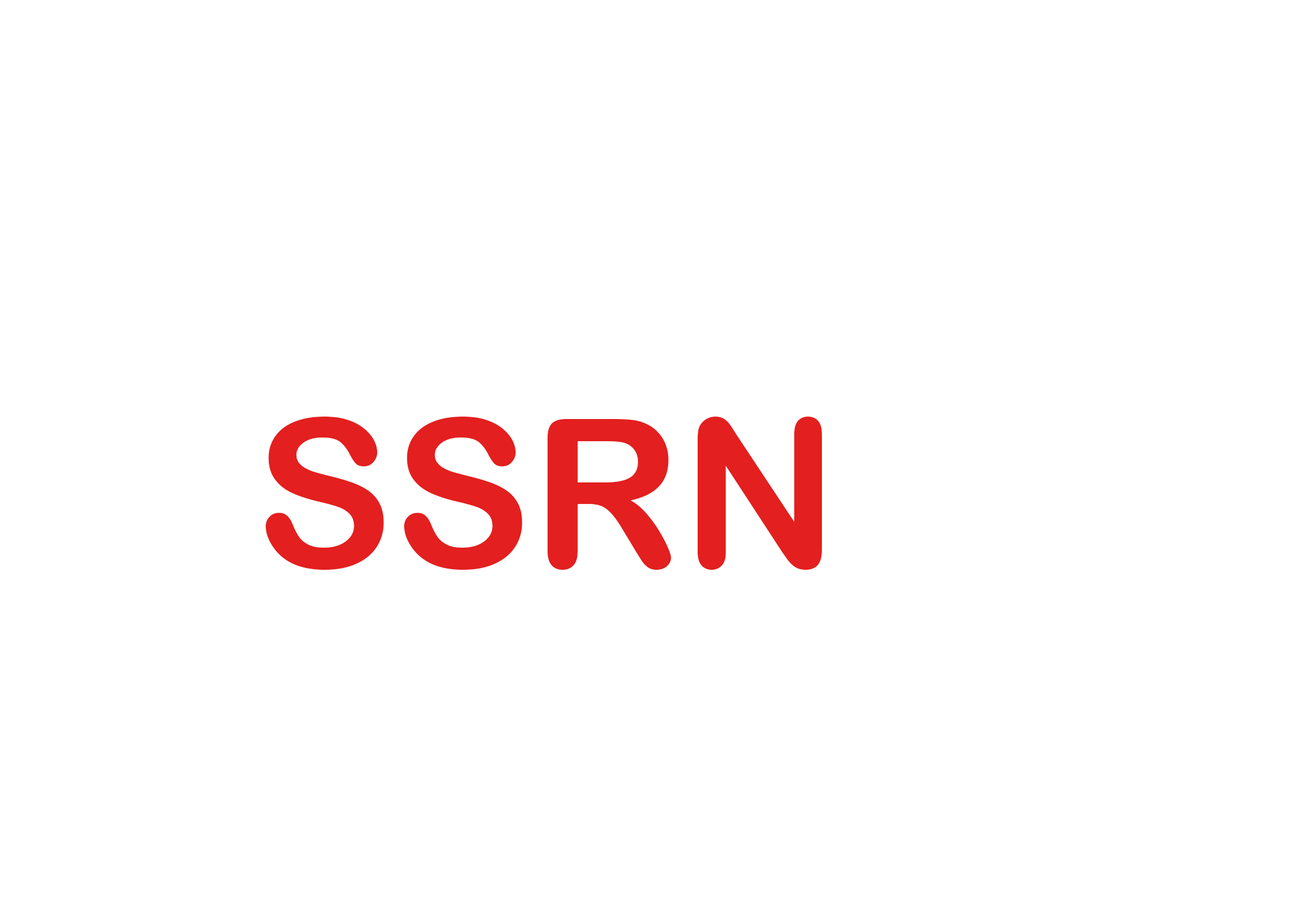
<style>
.page{position:relative;width:1292px;height:923px;background:#ffffff}
.page>*{position:absolute;margin:0}
.t1{font:207.7px "ArialRoundedMTBold";color:#e31f1f}
</style>
<div class="page">
<p class="t1" style="left:265px;top:417px;width:557px;height:153px">SSRN</p>
</div>
